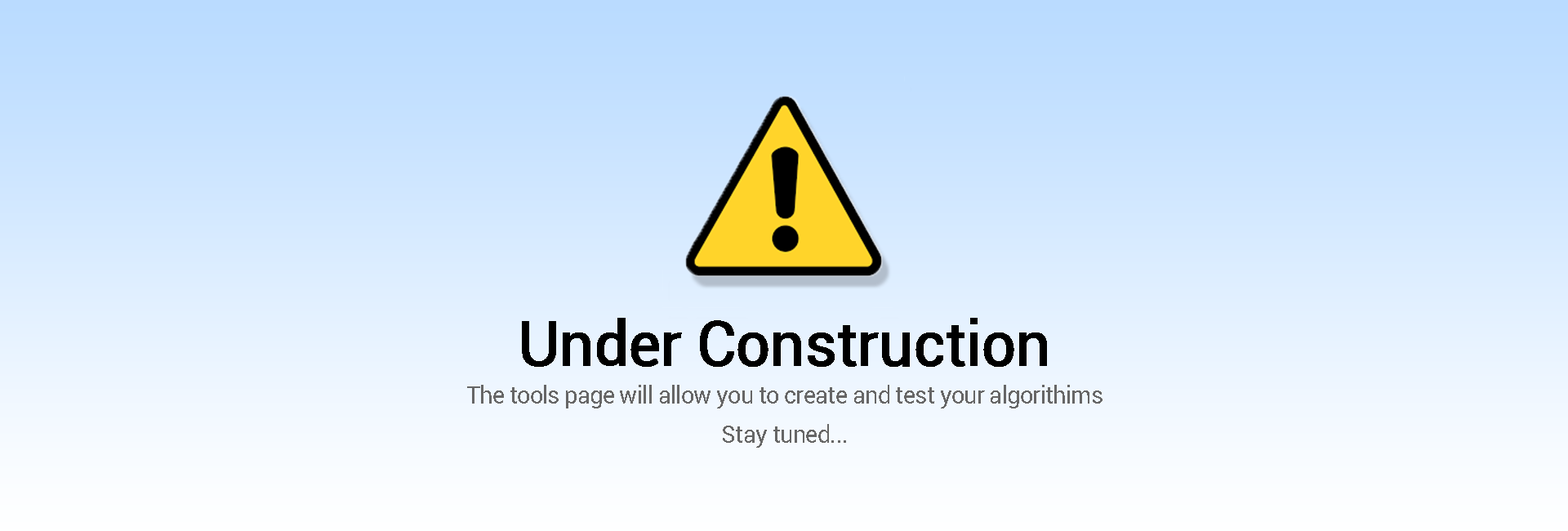
<style>
.page{position:relative;width:1568px;height:531px}
.page>*{position:absolute;margin:0}
.t1{font:61.3px "Roboto-Regular";letter-spacing:-0.02em;color:#000000;font-weight:bold}
.t2{font:23.8px "Roboto-Regular";letter-spacing:-0.02em;color:#666666}
</style>
<div class="page">
<p class="t1" style="left:522px;top:318px;width:525px;height:49px">Under Construction</p>
<p class="t2" style="left:467px;top:385px;width:635px;height:23px">The tools page will allow you to create and test your algorithims</p>
<p class="t2" style="left:723px;top:424px;width:123px;height:24px">Stay tuned...</p>
</div>
